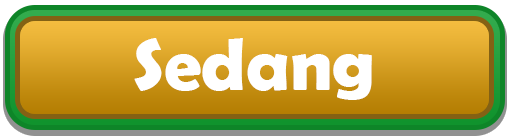
<style>
.page{position:relative;width:510px;height:138px}
.page>*{position:absolute;margin:0}
.t1{font:75px "BerlinSansFBDemi-Bold";color:#ffffff}
</style>
<div class="page">
<p class="t1" style="left:134px;top:38px;width:238px;height:62px">Sedang</p>
</div>
